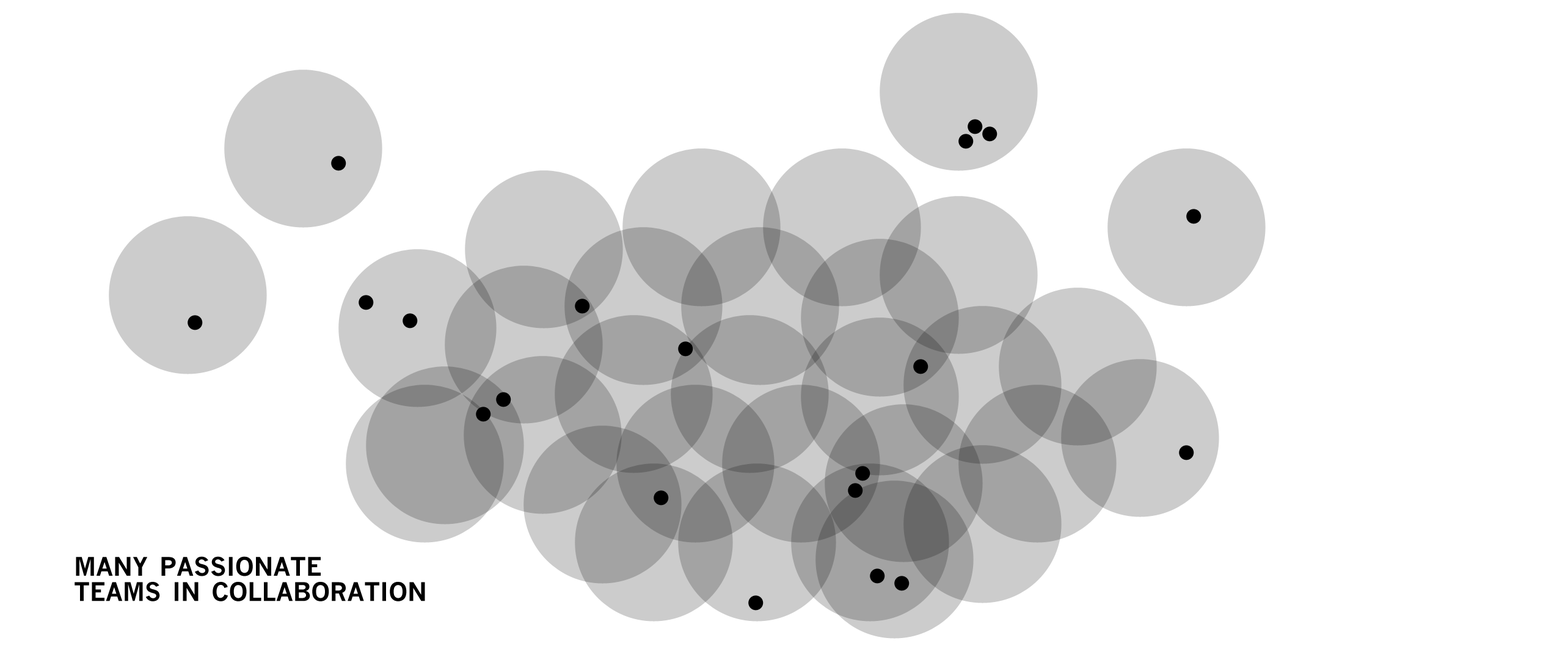
<style>
.page{position:relative;width:1568px;height:671px;background:#ffffff}
.page>*{position:absolute;margin:0}
.t1{font:35.7px/25.3px "NewsGothicMT-Bold";color:#000000;font-variant:small-caps}
</style>
<div class="page">
<p class="t1" style="left:75px;top:556px;width:350px;height:46px">many passionate<br>teams in collaboration</p>
</div>
